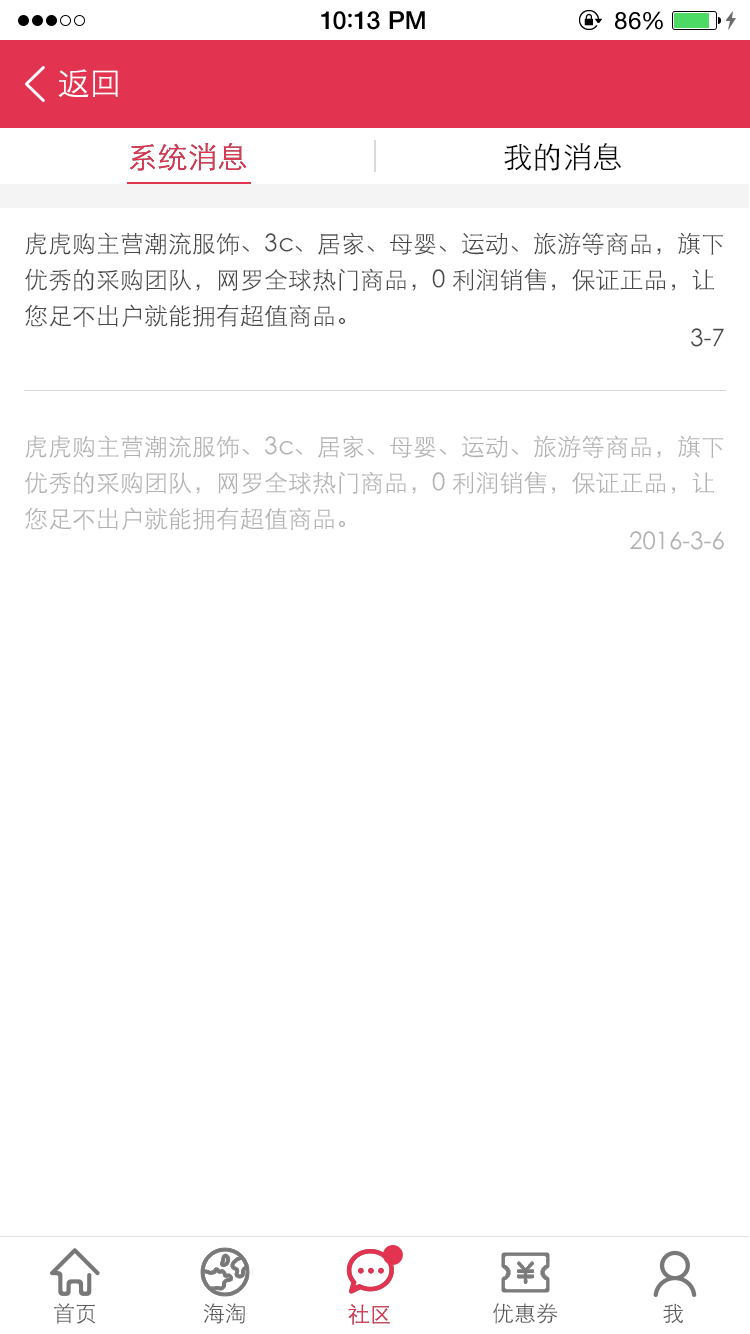
<style>
.page{position:relative;width:750px;height:1334px;background:#ffffff}
.page>*{position:absolute;margin:0}
.t1{font:25px "HelveticaNeue-Medium";letter-spacing:0.015em;color:#000000}
.t2{font:25px "ArialRoundedMTBold";letter-spacing:0.015em;color:#000000}
.t3{font:24px "HelveticaNeue";letter-spacing:0.03em;color:#000000}
.t4{font:33px "STXihei";color:#ffffff}
.t5{font:30px "STXihei";color:#e23351}
.t6{font:30px "STXihei";color:#0a0a0a}
.t7{font:24px/36px "STXihei";color:#48484a}
.t8{font:24px "STXihei";color:#48484a}
.t9{font:24px/36px "STXihei";color:#b2b2b2}
.t10{font:24px "STXihei";color:#b2b2b2}
.t11{font:21.9px "STXihei";color:#5a5a5a}
.t12{font:21.9px "STXihei";color:#e23351}
</style>
<div class="page">
<p class="t1" style="left:321px;top:11px;width:104px;height:19px">10<span class="t2">:</span>13 PM</p>
<p class="t3" style="left:615px;top:11px;width:48px;height:19px">86%</p>
<p class="t4" style="left:58px;top:69px;width:60px;height:29px">返回</p>
<p class="t5" style="left:129px;top:143px;width:118px;height:28px">系统消息</p>
<p class="t5" style="left:129px;top:143px;width:118px;height:28px">系统消息</p>
<p class="t6" style="left:504px;top:143px;width:118px;height:28px">我的消息</p>
<p class="t7" style="left:25px;top:232px;width:698px;height:95px">虎虎购主营潮流服饰、3c、居家、母婴、运动、旅游等商品，旗下<br>优秀的采购团队，网罗全球热门商品，0利润销售，保证正品，让<br>您足不出户就能拥有超值商品。</p>
<p class="t8" style="left:691px;top:328px;width:33px;height:19px">3-7</p>
<p class="t9" style="left:25px;top:435px;width:698px;height:95px">虎虎购主营潮流服饰、3c、居家、母婴、运动、旅游等商品，旗下<br>优秀的采购团队，网罗全球热门商品，0利润销售，保证正品，让<br>您足不出户就能拥有超值商品。</p>
<p class="t10" style="left:629px;top:531px;width:95px;height:19px">2016-3-6</p>
<p class="t11" style="left:54px;top:1303px;width:42px;height:21px">首页</p>
<p class="t11" style="left:203px;top:1303px;width:42px;height:21px">海淘</p>
<p class="t12" style="left:348px;top:1304px;width:42px;height:21px">社区</p>
<p class="t12" style="left:348px;top:1304px;width:42px;height:21px">社区</p>
<p class="t11" style="left:492px;top:1303px;width:65px;height:21px">优惠券</p>
<p class="t11" style="left:663px;top:1303px;width:20px;height:20px">我</p>
</div>
